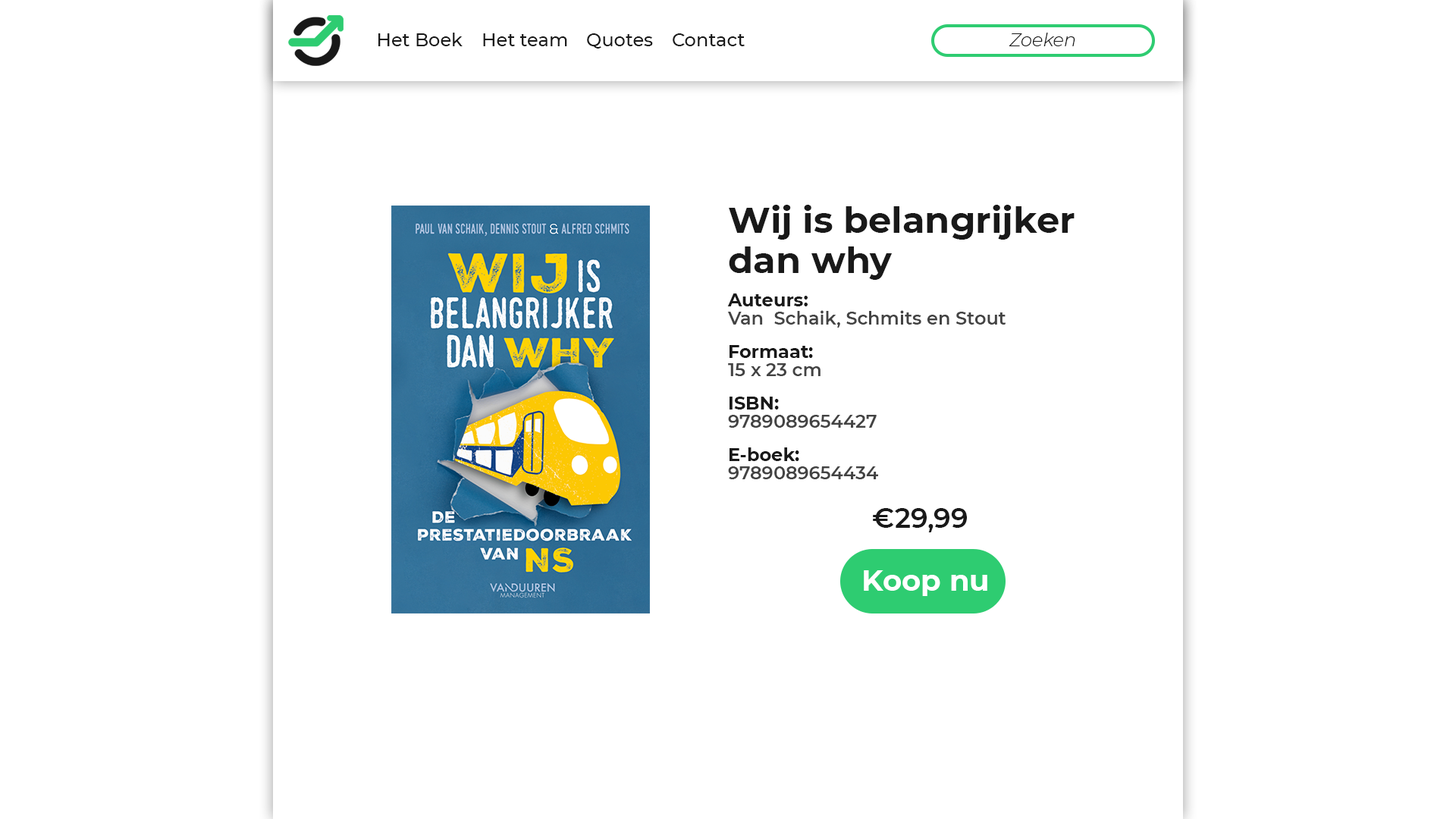
<style>
.page{position:relative;width:1456px;height:819px;background:#ffffff}
.page>*{position:absolute;margin:0}
.t1{font:18.2px "Montserrat-Medium";color:#191919}
.t2{font:18.2px "Montserrat-LightItalic";color:#191919}
.t3{font:18.2px/18.2px "Montserrat-SemiBold";color:#434343}
.t4{font:36.4px/40.2px "Montserrat-Bold";color:#191919}
.t5{font:18.2px/33.4px "Montserrat-Bold";color:#191919}
.t6{font:27.3px "Montserrat-SemiBold";color:#191919}
.t7{font:29.2px "Montserrat-Bold";color:#ffffff}
</style>
<div class="page">
<p class="t1" style="left:378px;top:33px;width:85px;height:13px">Het Boek</p>
<p class="t1" style="left:483px;top:33px;width:84px;height:13px">Het team</p>
<p class="t1" style="left:587px;top:33px;width:66px;height:16px">Quotes</p>
<p class="t1" style="left:673px;top:33px;width:72px;height:13px">Contact</p>
<p class="t2" style="left:1009px;top:33px;width:66px;height:13px">Zoeken</p>
<p class="t3" style="left:727px;top:205px;width:348px;height:274px"><span class="t4">Wij is belangrijker dan why<br></span><span class="t5">Auteurs:<br></span>Van  Schaik, Schmits en Stout<br><span class="t5">Formaat:<br></span>15 x 23 cm<br><span class="t5">ISBN:<br></span>9789089654427<br><span class="t5">E-boek:<br></span>9789089654434</p>
<p class="t6" style="left:873px;top:508px;width:94px;height:24px">€29,99</p>
<p class="t7" style="left:864px;top:570px;width:123px;height:26px">Koop nu</p>
</div>
